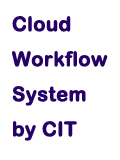
<style>
.page{position:relative;width:120px;height:160px;background:#ffffff}
.page>*{position:absolute;margin:0}
.t1{font:20px "ArialRoundedMTBold";color:#260266;font-weight:bold}
</style>
<div class="page">
<p class="t1" style="left:12px;top:16px;width:96px;height:125px">Cloud<br>Workflow<br>System<br>by CIT</p>
</div>
